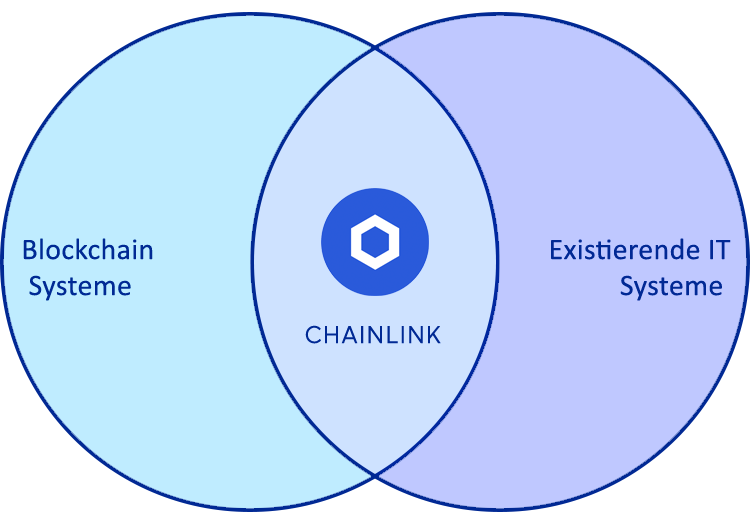
<style>
.page{position:relative;width:750px;height:524px;background:#bfc8ff}
.page>*{position:absolute;margin:0}
.t1{font:30px "Calibri";letter-spacing:0.01em;color:#012994}
</style>
<div class="page">
<p class="t1" style="left:23px;top:238px;width:130px;height:63px">Blockchain<br> Systeme</p>
<p class="t1" style="left:551px;top:238px;width:180px;height:63px;text-align:right">Existierende IT<br> Systeme</p>
</div>
